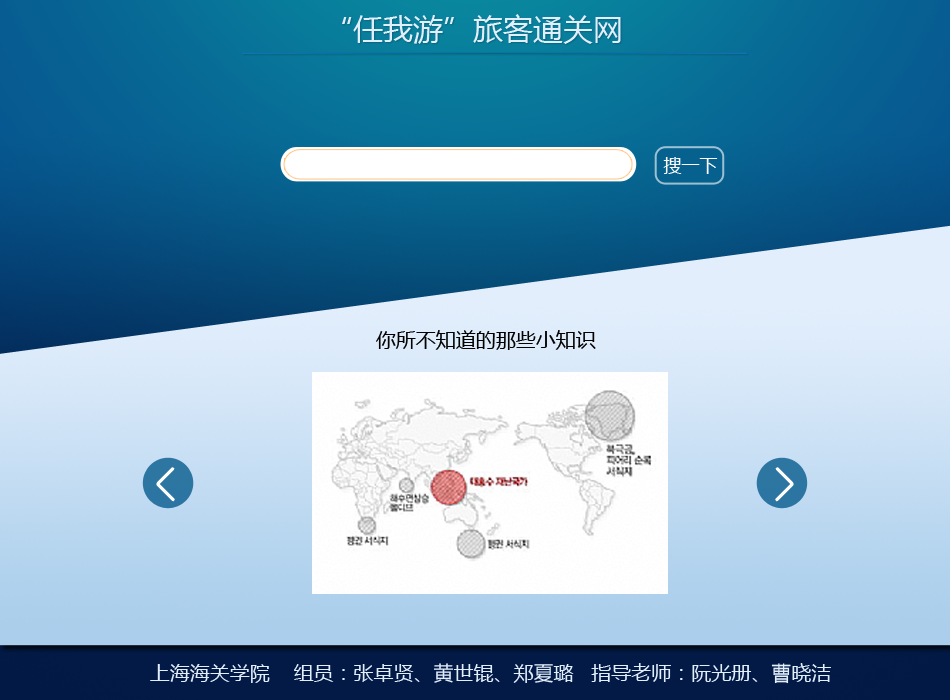
<style>
.page{position:relative;width:950px;height:700px}
.page>*{position:absolute;margin:0}
.t1{font:30px "MicrosoftYaHei";color:#e2eefc}
.t2{font:18px "MicrosoftYaHei";color:#ffffff}
.t3{font:20px "MicrosoftYaHei";color:#010101}
.t4{font:20px "MicrosoftYaHei";color:#e2eefc}
</style>
<div class="page">
<p class="t1" style="left:342px;top:14px;width:279px;height:30px">“任我游”旅客通关网</p>
<p class="t2" style="left:663px;top:157px;width:55px;height:17px">搜一下</p>
<p class="t3" style="left:376px;top:330px;width:220px;height:20px">你所不知道的那些小知识</p>
<p class="t4" style="left:150px;top:663px;width:681px;height:21px">上海海关学院    组员：张卓贤、黄世锟、郑夏璐   指导老师：阮光册、曹晓洁</p>
</div>
